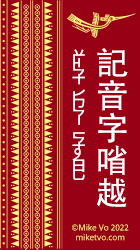
<style>
.page{position:relative;width:140px;height:250px;background:#970015}
.page>*{position:absolute;margin:0}
.t1{font:23.7px "NotoSansVNTamThu-Regular";color:#ffffff}
.t2{font:32.6px/32.6px "AdobeHeitiStd-Regular";color:#ffffff}
.t3{font:8.2px "NotoSans";color:#fff47d}
</style>
<div class="page">
<p class="t1" style="left:72px;top:49px;width:13px;height:131px;rotate:90deg">ɩɻʎ ɦɾʍ ɥʒʄ</p>
<p class="t2" style="left:97px;top:48px;width:31px;height:159px;text-align:center">記<br>音<br>字<br>㗂<br>越</p>
<p class="t3" style="left:72px;top:224px;width:57px;height:17px;text-align:center">©Mike Vo 2022<br>miketvo.com</p>
</div>
